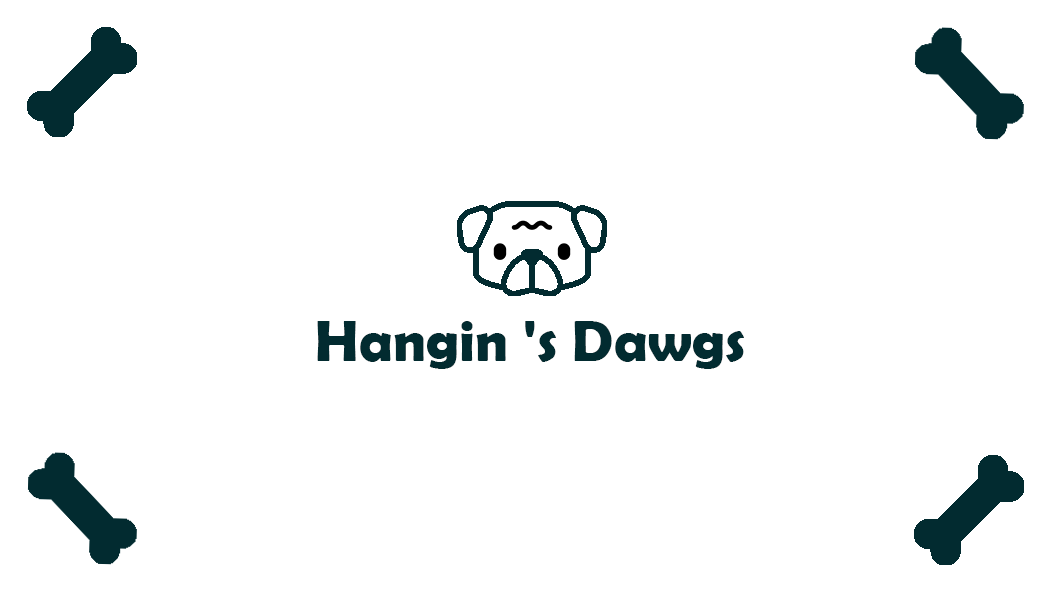
<style>
.page{position:relative;width:1063px;height:591px;background:#ffffff}
.page>*{position:absolute;margin:0}
.t1{font:58.3px "BerlinSansFBDemi-Bold";color:#022b30}
</style>
<div class="page">
<p class="t1" style="left:317px;top:321px;width:427px;height:48px">Hangin 's Dawgs</p>
</div>
